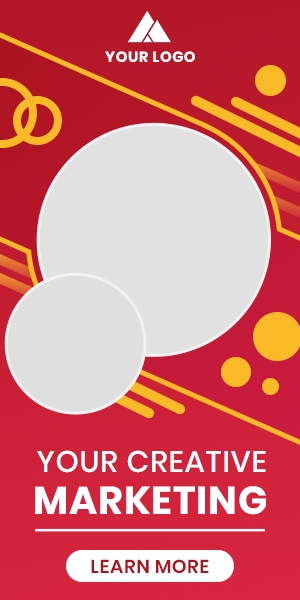
<style>
.page{position:relative;width:300px;height:600px}
.page>*{position:absolute;margin:0}
.t1{font:14.8px "Poppins-Bold";letter-spacing:0.025em;color:#fefefe}
.t2{font:29.8px "Poppins-Medium";letter-spacing:0.025em;color:#ffffff}
.t3{font:39px "Poppins-Bold";letter-spacing:0.025em;color:#ffffff}
.t4{font:18.7px "Poppins-SemiBold";letter-spacing:0.025em;color:#aa151f}
</style>
<div class="page">
<p class="t1" style="left:105px;top:51px;width:90px;height:11px">YOUR LOGO</p>
<p class="t2" style="left:37px;top:450px;width:229px;height:23px">YOUR CREATIVE</p>
<p class="t3" style="left:35px;top:486px;width:231px;height:29px">MARKETING</p>
<p class="t4" style="left:91px;top:559px;width:118px;height:15px">LEARN MORE</p>
</div>
